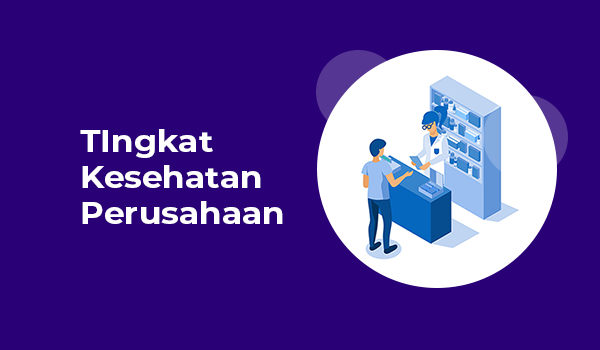
<style>
.page{position:relative;width:600px;height:350px;background:#290076}
.page>*{position:absolute;margin:0}
.t1{font:30px "Montserrat-Bold";color:#ffffff;scale:1.1 1}
</style>
<div class="page">
<p class="t1" style="left:80px;top:129px;width:203px;height:95px">TIngkat<br>Kesehatan<br>Perusahaan</p>
</div>
